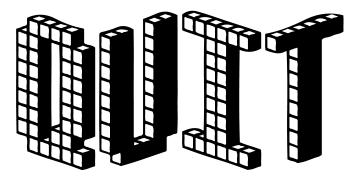
<style>
.page{position:relative;width:360px;height:180px;background:#ffffff}
.page>*{position:absolute;margin:0}
.t1{font:166.7px "Blox-(BRK";color:#000000}
</style>
<div class="page">
<p class="t1" style="left:16px;top:10px;width:328px;height:160px">QuIt</p>
</div>
